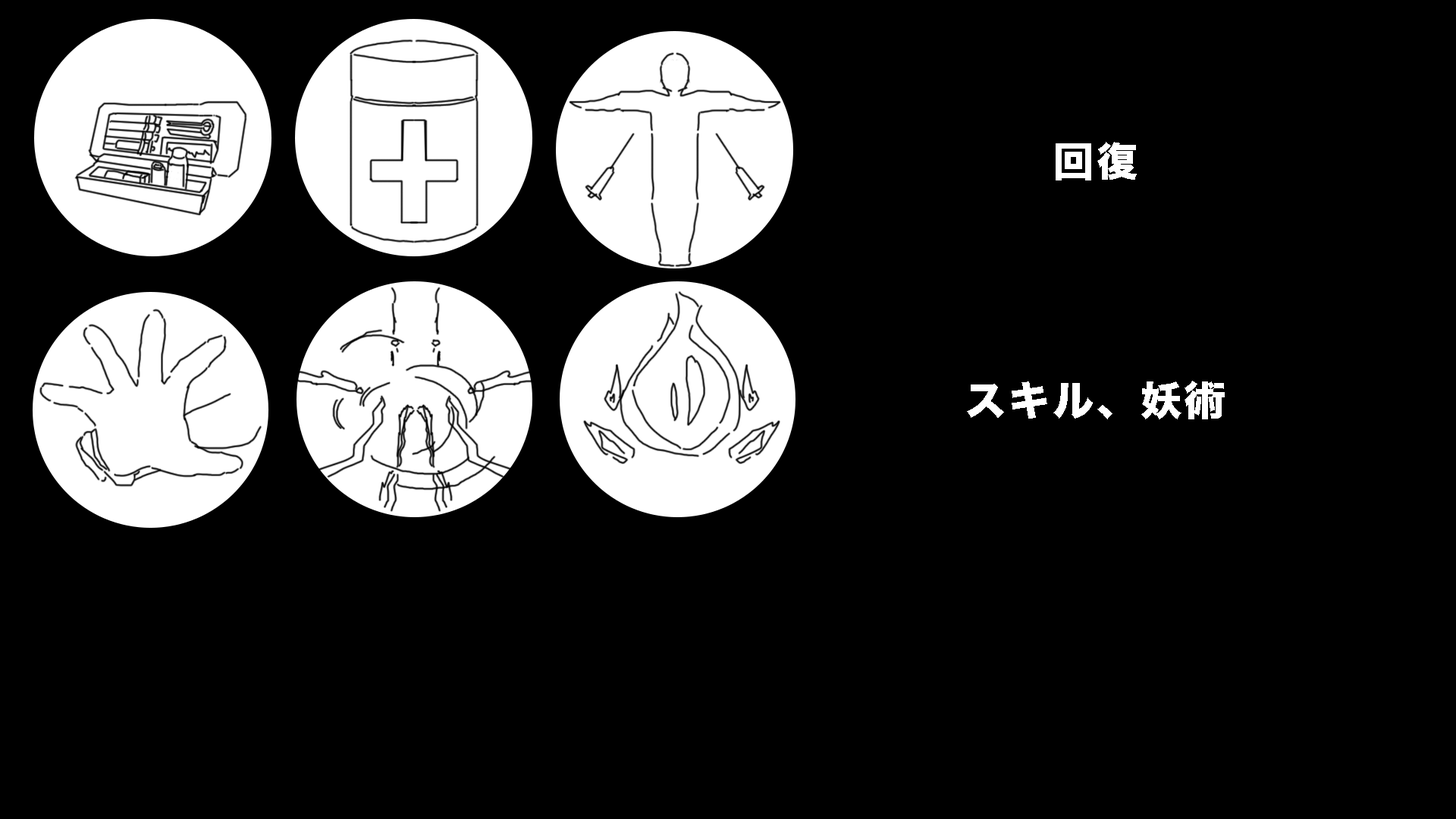
<style>
.page{position:relative;width:1456px;height:819px;background:#000000}
.page>*{position:absolute;margin:0}
.t1{font:40.9px "HiraKakuStd-W8";letter-spacing:0.075em;color:#ffffff}
</style>
<div class="page">
<p class="t1" style="left:1056px;top:142px;width:81px;height:38px">回復</p>
<p class="t1" style="left:967px;top:381px;width:258px;height:38px">スキル、妖術</p>
</div>
